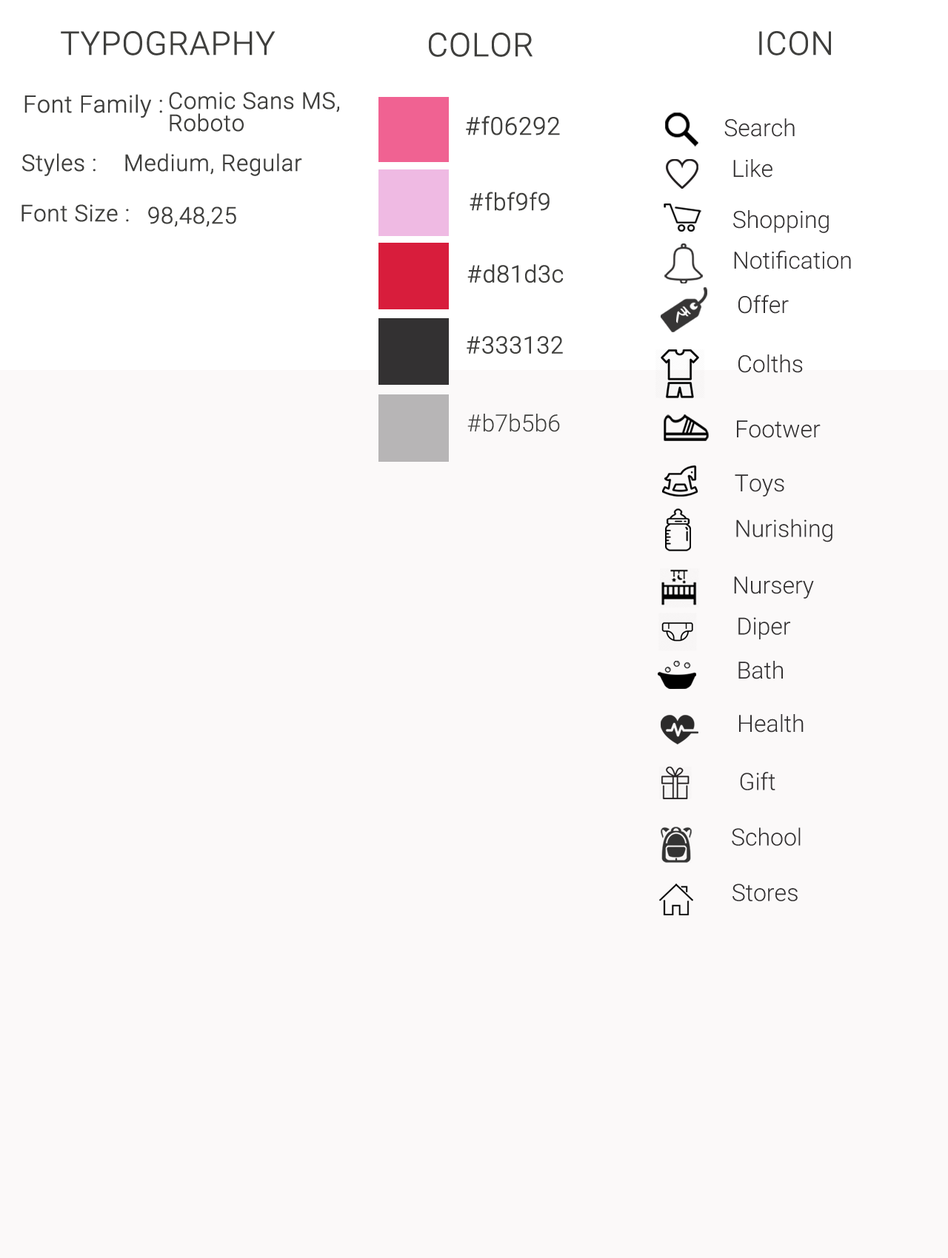
<style>
.page{position:relative;width:948px;height:1258px;background:#fbf9f9}
.page>*{position:absolute;margin:0}
.t1{font:32.6px "Roboto-Light";color:#3f3f3d;font-weight:bold}
.t2{font:23.7px "Roboto-Light";color:#3f3f3d;font-weight:bold}
.t3{font:22.9px/22.2px "Roboto-Light";color:#3f3f3d;font-weight:bold}
.t4{font:24.4px "Roboto-Light";color:#3f3f3d;font-weight:bold}
.t5{font:23.7px "Roboto-Light";color:#333132}
.t6{font:22.9px "Roboto-Light";color:#3f3f3d;font-weight:bold}
.t7{font:23.7px "Roboto-Light";color:#3f3f3d}
.t8{font:23.7px "Roboto-Light";color:#b7b5b6}
</style>
<div class="page">
<p class="t1" style="left:61px;top:31px;width:214px;height:25px">TYPOGRAPHY</p>
<p class="t1" style="left:429px;top:33px;width:103px;height:24px">COLOR</p>
<p class="t1" style="left:759px;top:31px;width:72px;height:25px">ICON</p>
<p class="t2" style="left:24px;top:94px;width:138px;height:24px">Font Family :</p>
<p class="t3" style="left:169px;top:92px;width:170px;height:40px">Comic Sans MS,<br>Roboto</p>
<p class="t4" style="left:466px;top:115px;width:94px;height:20px">#f06292</p>
<p class="t5" style="left:724px;top:118px;width:70px;height:19px">Search</p>
<p class="t6" style="left:22px;top:153px;width:73px;height:23px">Styles :</p>
<p class="t6" style="left:125px;top:153px;width:177px;height:23px">Medium, Regular</p>
<p class="t5" style="left:733px;top:159px;width:39px;height:19px">Like</p>
<p class="t2" style="left:469px;top:192px;width:80px;height:19px">#fbf9f9</p>
<p class="t6" style="left:21px;top:204px;width:108px;height:18px">Font Size :</p>
<p class="t6" style="left:148px;top:207px;width:88px;height:20px">98,48,25</p>
<p class="t5" style="left:733px;top:210px;width:95px;height:23px">Shopping</p>
<p class="t5" style="left:734px;top:250px;width:117px;height:19px">Notification</p>
<p class="t2" style="left:467px;top:264px;width:96px;height:19px">#d81d3c</p>
<p class="t5" style="left:738px;top:295px;width:50px;height:19px">Offer</p>
<p class="t2" style="left:466px;top:336px;width:97px;height:18px">#333132</p>
<p class="t5" style="left:738px;top:355px;width:64px;height:18px">Colths</p>
<p class="t7" style="left:467px;top:414px;width:93px;height:18px"><span class="t8">      </span>#b7b5b6</p>
<p class="t5" style="left:737px;top:420px;width:83px;height:18px">Footwer</p>
<p class="t5" style="left:734px;top:475px;width:50px;height:22px">Toys</p>
<p class="t5" style="left:736px;top:519px;width:96px;height:24px">Nurishing</p>
<p class="t5" style="left:734px;top:577px;width:80px;height:22px">Nursery</p>
<p class="t5" style="left:738px;top:617px;width:52px;height:23px">Diper</p>
<p class="t5" style="left:738px;top:661px;width:44px;height:19px">Bath</p>
<p class="t5" style="left:739px;top:714px;width:64px;height:19px">Health</p>
<p class="t5" style="left:740px;top:772px;width:35px;height:19px">Gift</p>
<p class="t5" style="left:731px;top:828px;width:69px;height:18px">School</p>
<p class="t5" style="left:732px;top:884px;width:65px;height:18px">Stores</p>
</div>
